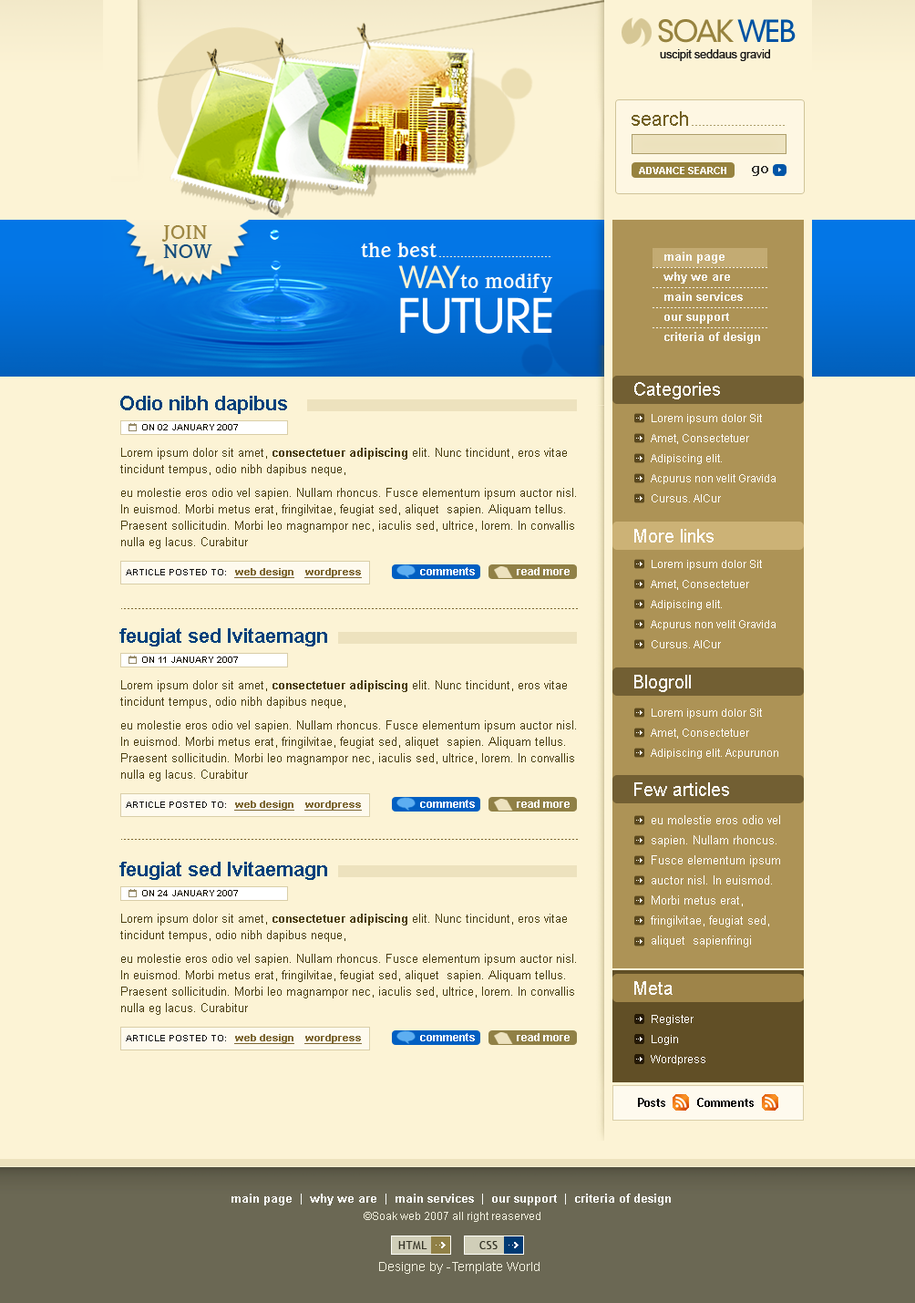
<style>
.page{position:relative;width:915px;height:1303px;background:#fcf3d5}
.page>*{position:absolute;margin:0}
.t1{font:29.2px "Geometric706BT-MediumB";letter-spacing:-0.075em;color:#97833f;text-transform:uppercase}
.t2{font:29.2px "Geometric706BT-MediumB";letter-spacing:-0.075em;color:#0153a3;text-transform:uppercase}
.t3{font:11.9px "ArialMT";letter-spacing:-0.025em;color:#121212}
.t4{font:20.1px "ArialMT";color:#726023}
.t5{font:10px "Arial-BoldMT";color:#ffffff;text-transform:uppercase}
.t6{font:12.8px "Verdana-Bold";color:#31302c}
.t7{font:20.1px "WeidemannITCbyBT-Bold";color:#9a833e;text-transform:uppercase}
.t8{font:20.1px "WeidemannITCbyBT-Bold";color:#00407b;text-transform:uppercase}
.t9{font:21.9px "WeidemannITCbyBT-Bold";color:#fafbfa}
.t10{font:11.9px/10px "Arial-BoldMT";color:#fafbfa}
.t11{font:29.2px "Geometric706BT-MediumB";letter-spacing:-0.075em;color:#fcf3d5;text-transform:uppercase}
.t12{font:45.6px "Geometric706BT-MediumB";letter-spacing:-0.05em;color:#ffffff;text-transform:uppercase}
.t13{font:18.2px "ArialMT";color:#ffffff}
.t14{font:20.1px "Arial-BoldMT";color:#00407b}
.t15{font:10.9px/20.1px "ArialMT";color:#ffffff}
.t16{font:9.1px "Arial-BoldMT";color:#120e02;text-transform:uppercase}
.t17{font:11.9px/16.4px "ArialMT";color:#4a3d0f}
.t18{font:11.9px/16.4px "Arial-BoldMT";color:#4a3d0f}
.t19{font:10px "Arial-BoldMT";color:#7d6732;text-decoration:underline}
.t20{font:9.1px "ArialMT";color:#121212;text-transform:uppercase}
.t21{font:10.9px "Arial-BoldMT";color:#ffffff}
.t22{font:11.9px/20.1px "ArialMT";color:#ffffff}
.t23{font:11.9px "TrebuchetMS-Bold";color:#000000}
.t24{font:11.9px "Arial-BoldMT";color:#fafbfa}
.t25{font:10.9px "ArialMT";color:#f3f1df}
.t26{font:10.9px "TrebuchetMS";letter-spacing:0.05em;color:#353427;text-transform:uppercase}
.t27{font:12.8px "ArialMT";color:#f3f1df}
</style>
<div class="page">
<p class="t1" style="left:658px;top:19px;width:138px;height:24px">soak<span class="t2"> web</span></p>
<p class="t3" style="left:660px;top:49px;width:110px;height:12px">uscipit seddaus gravid</p>
<p class="t4" style="left:632px;top:111px;width:56px;height:15px">search</p>
<p class="t5" style="left:639px;top:167px;width:88px;height:7px">advance search</p>
<p class="t6" style="left:752px;top:166px;width:17px;height:10px">go</p>
<p class="t7" style="left:161px;top:225px;width:46px;height:17px">join</p>
<p class="t8" style="left:163px;top:244px;width:49px;height:14px">now</p>
<p class="t9" style="left:361px;top:243px;width:76px;height:14px">the best</p>
<p class="t10" style="left:664px;top:252px;width:96px;height:92px">main page<br><br>why we are<br><br>main services<br><br>our support<br><br>criteria of design</p>
<p class="t11" style="left:398px;top:265px;width:62px;height:23px">way</p>
<p class="t9" style="left:460px;top:273px;width:92px;height:20px">to modify</p>
<p class="t12" style="left:400px;top:297px;width:152px;height:37px">future</p>
<p class="t13" style="left:635px;top:382px;width:85px;height:17px">Categories</p>
<p class="t14" style="left:120px;top:396px;width:167px;height:18px">Odio nibh dapibus</p>
<p class="t15" style="left:651px;top:414px;width:125px;height:88px">Lorem ipsum dolor Sit <br>Amet, Consectetuer Adipiscing elit. <br>Acpurus non velit Gravida Cursus. AlCur</p>
<p class="t16" style="left:142px;top:424px;width:96px;height:6px">On 02 January 2007</p>
<p class="t17" style="left:120px;top:448px;width:456px;height:101px">Lorem ipsum dolor sit amet, <span class="t18">consectetuer adipiscing</span> elit. Nunc tincidunt, eros vitae tincidunt tempus, odio nibh dapibus neque, <br><br>eu molestie eros odio vel sapien. Nullam rhoncus. Fusce elementum ipsum auctor nisl. In euismod. Morbi metus erat, fringilvitae, feugiat sed, aliquet  sapien. Aliquam tellus. Praesent sollicitudin. Morbi leo magnampor nec, iaculis sed, ultrice, lorem. In convallis nulla eg lacus. Curabitur</p>
<p class="t13" style="left:635px;top:529px;width:79px;height:13px">More links</p>
<p class="t19" style="left:126px;top:568px;width:236px;height:10px"><span class="t20">article posted to:   </span>web design    wordpress</p>
<p class="t21" style="left:420px;top:567px;width:55px;height:8px">comments</p>
<p class="t21" style="left:517px;top:567px;width:53px;height:8px">read more</p>
<p class="t15" style="left:651px;top:560px;width:125px;height:88px">Lorem ipsum dolor Sit <br>Amet, Consectetuer Adipiscing elit. <br>Acpurus non velit Gravida Cursus. AlCur</p>
<p class="t14" style="left:119px;top:628px;width:208px;height:18px">feugiat sed lvitaemagn</p>
<p class="t16" style="left:142px;top:656px;width:96px;height:7px">On 11 January 2007</p>
<p class="t13" style="left:635px;top:675px;width:56px;height:17px">Blogroll</p>
<p class="t17" style="left:120px;top:680px;width:456px;height:101px">Lorem ipsum dolor sit amet, <span class="t18">consectetuer adipiscing</span> elit. Nunc tincidunt, eros vitae tincidunt tempus, odio nibh dapibus neque, <br><br>eu molestie eros odio vel sapien. Nullam rhoncus. Fusce elementum ipsum auctor nisl. In euismod. Morbi metus erat, fringilvitae, feugiat sed, aliquet  sapien. Aliquam tellus. Praesent sollicitudin. Morbi leo magnampor nec, iaculis sed, ultrice, lorem. In convallis nulla eg lacus. Curabitur</p>
<p class="t15" style="left:651px;top:708px;width:128px;height:51px">Lorem ipsum dolor Sit <br>Amet, Consectetuer Adipiscing elit. Acpurunon</p>
<p class="t13" style="left:635px;top:782px;width:94px;height:14px">Few articles</p>
<p class="t19" style="left:126px;top:800px;width:236px;height:10px"><span class="t20">article posted to:   </span>web design    wordpress</p>
<p class="t21" style="left:420px;top:800px;width:55px;height:8px">comments</p>
<p class="t21" style="left:517px;top:800px;width:53px;height:8px">read more</p>
<p class="t22" style="left:651px;top:815px;width:129px;height:132px">eu molestie eros odio vel sapien. Nullam rhoncus. Fusce elementum ipsum auctor nisl. In euismod. Morbi metus erat, fringilvitae, feugiat sed, aliquet  sapienfringi</p>
<p class="t14" style="left:119px;top:862px;width:208px;height:18px">feugiat sed lvitaemagn</p>
<p class="t16" style="left:142px;top:890px;width:96px;height:6px">On 24 January 2007</p>
<p class="t17" style="left:120px;top:913px;width:456px;height:102px">Lorem ipsum dolor sit amet, <span class="t18">consectetuer adipiscing</span> elit. Nunc tincidunt, eros vitae tincidunt tempus, odio nibh dapibus neque, <br><br>eu molestie eros odio vel sapien. Nullam rhoncus. Fusce elementum ipsum auctor nisl. In euismod. Morbi metus erat, fringilvitae, feugiat sed, aliquet  sapien. Aliquam tellus. Praesent sollicitudin. Morbi leo magnampor nec, iaculis sed, ultrice, lorem. In convallis nulla eg lacus. Curabitur</p>
<p class="t13" style="left:635px;top:981px;width:38px;height:14px">Meta</p>
<p class="t15" style="left:651px;top:1015px;width:55px;height:50px">Register<br>Login<br>Wordpress</p>
<p class="t19" style="left:126px;top:1034px;width:236px;height:10px"><span class="t20">article posted to:   </span>web design    wordpress</p>
<p class="t21" style="left:420px;top:1033px;width:55px;height:8px">comments</p>
<p class="t21" style="left:517px;top:1033px;width:53px;height:8px">read more</p>
<p class="t23" style="left:638px;top:1098px;width:28px;height:9px">Posts</p>
<p class="t23" style="left:697px;top:1098px;width:57px;height:9px">Comments</p>
<p class="t24" style="left:232px;top:1193px;width:439px;height:12px">main page  |  why we are  |  main services  |  our support  |  criteria of design</p>
<p class="t25" style="left:364px;top:1212px;width:177px;height:10px">©Soak web 2007 all right reaserved</p>
<p class="t26" style="left:398px;top:1241px;width:30px;height:8px">html</p>
<p class="t26" style="left:480px;top:1241px;width:18px;height:8px">css</p>
<p class="t27" style="left:379px;top:1262px;width:161px;height:12px">Designe by -Template World</p>
</div>
